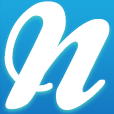
<style>
.page{position:relative;width:114px;height:114px;background:#ffffff}
.page>*{position:absolute;margin:0}
.t1{font:153.2px "BallparkWeiner";color:#ffffff}
</style>
<div class="page">
<p class="t1" style="left:4px;top:1px;width:106px;height:109px">N</p>
</div>
